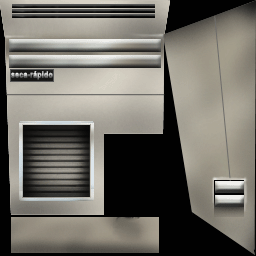
<style>
.page{position:relative;width:256px;height:256px;background:#010101}
.page>*{position:absolute;margin:0}
.t1{font:8.7px "Arial-BoldMT";font-weight:bold;scale:0.82 1}
</style>
<div class="page">
<p class="t1" style="left:10px;top:71px;width:43px;height:9px">seca-rápido</p>
</div>
